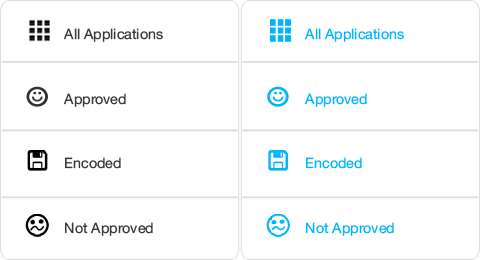
<style>
.page{position:relative;width:480px;height:260px;background:#ffffff}
.page>*{position:absolute;margin:0}
.t1{font:14.3px/64.7px "HelveticaNeue";color:#383838}
.t2{font:14.3px/64.7px "HelveticaNeue";color:#00b4ff}
</style>
<div class="page">
<p class="t1" style="left:63px;top:28px;width:100px;height:208px">All Applications<br>Approved<br>Encoded<br>Not Approved</p>
<p class="t2" style="left:304px;top:28px;width:100px;height:208px">All Applications<br>Approved<br>Encoded<br>Not Approved</p>
</div>
